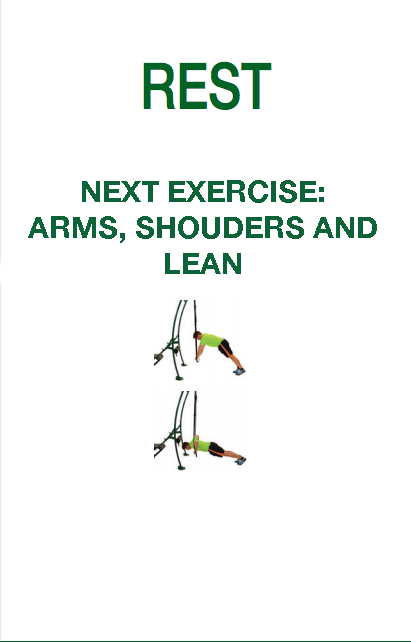
<style>
.page{position:relative;width:411px;height:642px;background:#ffffff}
.page>*{position:absolute;margin:0}
.t1{font:30px "HelveticaNeue-Bold";color:#0d6338}
</style>
<div class="page">
<p class="t1" style="left:28px;top:180px;width:349px;height:94px;text-align:center">NEXT EXERCISE:<br>ARMS, SHOUDERS AND LEAN</p>
</div>
